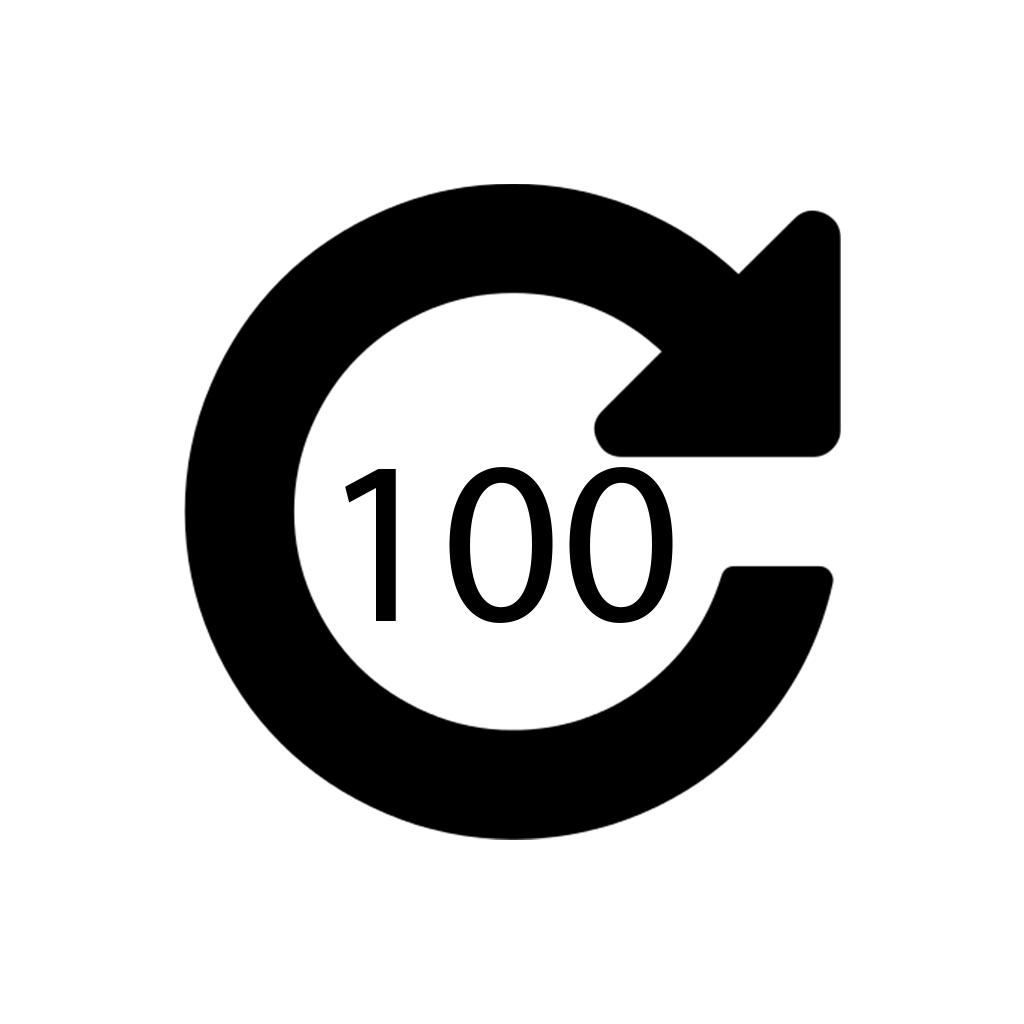
<style>
.page{position:relative;width:1024px;height:1024px;background:#ffffff}
.page>*{position:absolute;margin:0}
.t1{font:233.3px "MyriadPro-Regular";color:#000000}
</style>
<div class="page">
<p class="t1" style="left:345px;top:467px;width:328px;height:156px">100</p>
</div>
